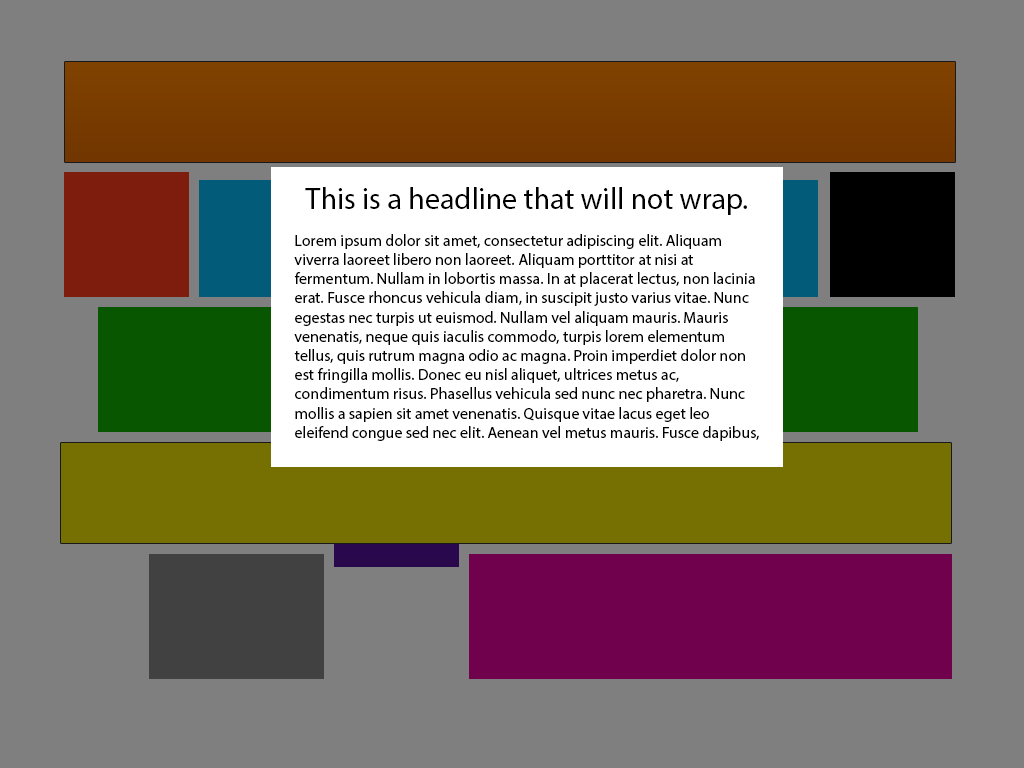
<style>
.page{position:relative;width:1024px;height:768px;background:#7f7f7f}
.page>*{position:absolute;margin:0}
.t1{font:30px "MyriadPro-Regular";color:#000000}
.t2{font:16px "MyriadPro-Regular";color:#000000}
</style>
<div class="page">
<p class="t1" style="left:305px;top:187px;width:442px;height:28px">This is a headline that will not wrap.</p>
<p class="t2" style="left:294px;top:234px;width:465px;height:207px">Lorem ipsum dolor sit amet, consectetur adipiscing elit. Aliquam viverra laoreet libero non laoreet. Aliquam porttitor at nisi at fermentum. Nullam in lobortis massa. In at placerat lectus, non lacinia erat. Fusce rhoncus vehicula diam, in suscipit justo varius vitae. Nunc egestas nec turpis ut euismod. Nullam vel aliquam mauris. Mauris venenatis, neque quis iaculis commodo, turpis lorem elementum tellus, quis rutrum magna odio ac magna. Proin imperdiet dolor non est fringilla mollis. Donec eu nisl aliquet, ultrices metus ac, condimentum risus. Phasellus vehicula sed nunc nec pharetra. Nunc mollis a sapien sit amet venenatis. Quisque vitae lacus eget leo eleifend congue sed nec elit. Aenean vel metus mauris. Fusce dapibus, lectus nec adipiscing sollicitudin, quam massa sagittis magna, vel rutrum risus sem eu magna. Phasellus rutrum suscipit tincidunt.</p>
</div>
